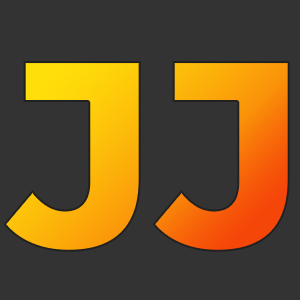
<style>
.page{position:relative;width:300px;height:300px;background:#333333}
.page>*{position:absolute;margin:0}
.t1{font:267px "Montserrat-ExtraBold"}
</style>
<div class="page">
<p class="t1" style="left:3px;top:61px;width:287px;height:191px">JJ</p>
</div>
